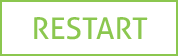
<style>
.page{position:relative;width:178px;height:56px;background:#ffffff}
.page>*{position:absolute;margin:0}
.t1{font:30px "Aller";color:#8bc74f}
</style>
<div class="page">
<p class="t1" style="left:34px;top:17px;width:114px;height:23px">RESTART</p>
</div>
